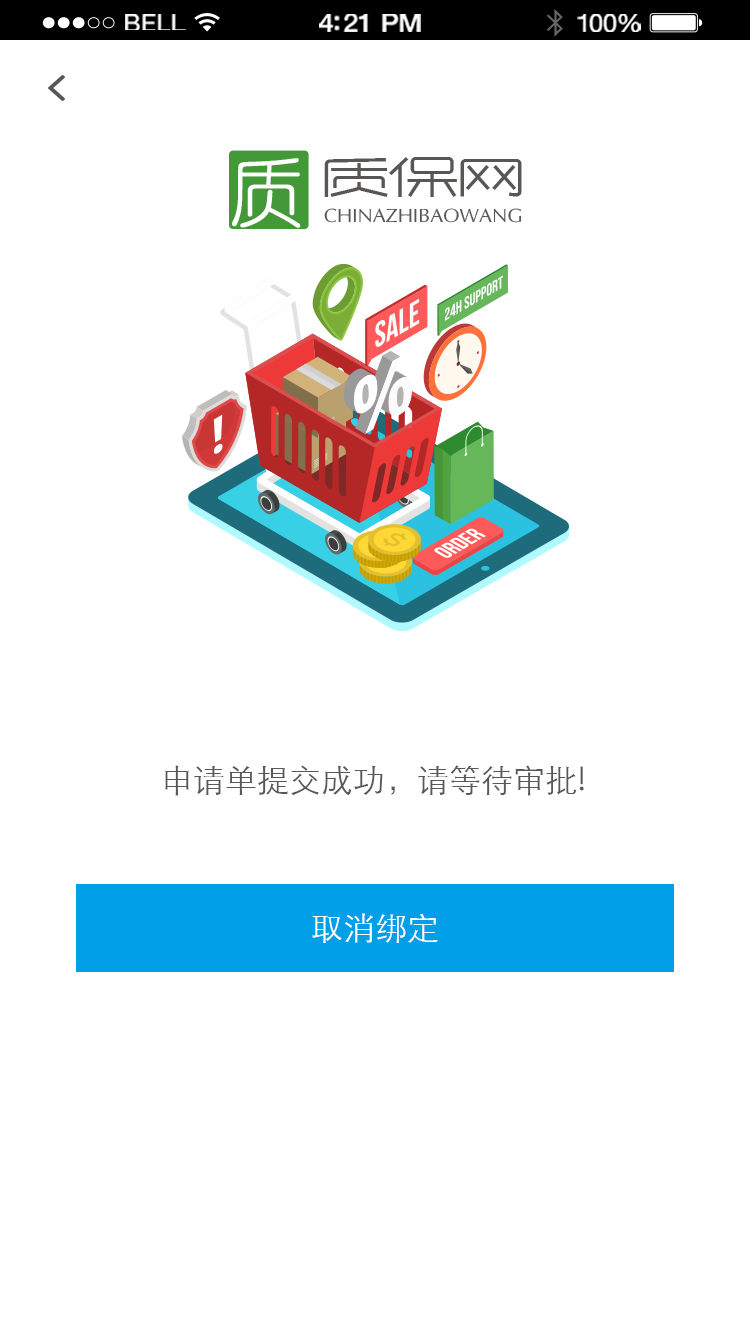
<style>
.page{position:relative;width:750px;height:1334px;background:#ffffff}
.page>*{position:absolute;margin:0}
.t1{font:23.3px "HelveticaNeue";letter-spacing:0.02em;color:#ffffff;scale:1.06 1}
.t2{font:25.3px "HelveticaNeue-Medium";letter-spacing:-0.02em;color:#ffffff;scale:1.06 1}
.t3{font:24.3px "HelveticaNeue";letter-spacing:-0.02em;color:#ffffff;scale:1.06 1}
.t4{font:32px "STXihei";color:#595757}
.t5{font:32px "STXihei";color:#ffffff}
</style>
<div class="page">
<p class="t1" style="left:125px;top:14px;width:61px;height:16px">BELL</p>
<p class="t2" style="left:319px;top:14px;width:102px;height:18px">4:21 PM</p>
<p class="t3" style="left:577px;top:14px;width:64px;height:18px">100%</p>
<p class="t4" style="left:165px;top:765px;width:419px;height:31px">申请单提交成功，请等待审批!</p>
<p class="t5" style="left:312px;top:913px;width:126px;height:30px">取消绑定</p>
</div>
